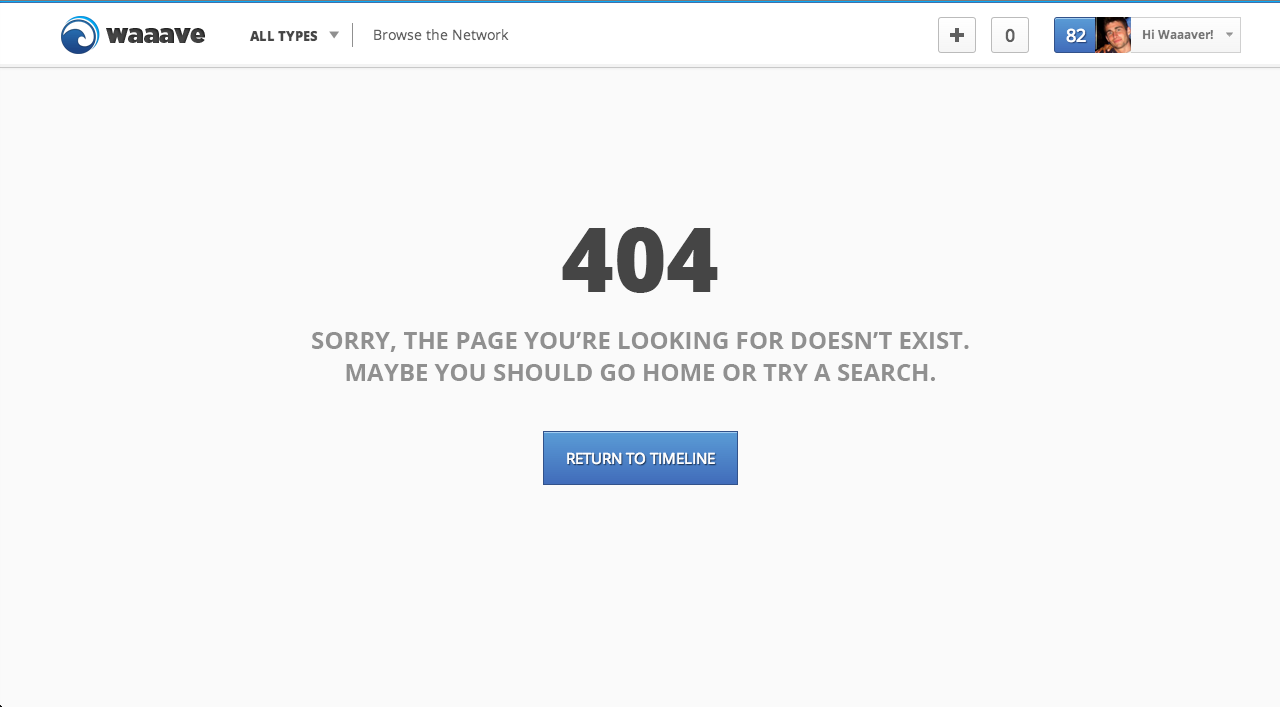
<style>
.page{position:relative;width:1280px;height:707px;background:#fafafa}
.page>*{position:absolute;margin:0}
.t1{font:90px "OpenSans-Extrabold";color:#454545}
.t2{font:24px/32px "OpenSans-Bold";color:#909090}
</style>
<div class="page">
<p class="t1" style="left:562px;top:227px;width:156px;height:66px">404</p>
<p class="t2" style="left:312px;top:332px;width:657px;height:49px;text-align:center">SORRY, THE PAGE YOU’RE LOOKING FOR DOESN’T EXIST.<br>MAYBE YOU SHOULD GO HOME OR TRY A SEARCH.</p>
</div>
